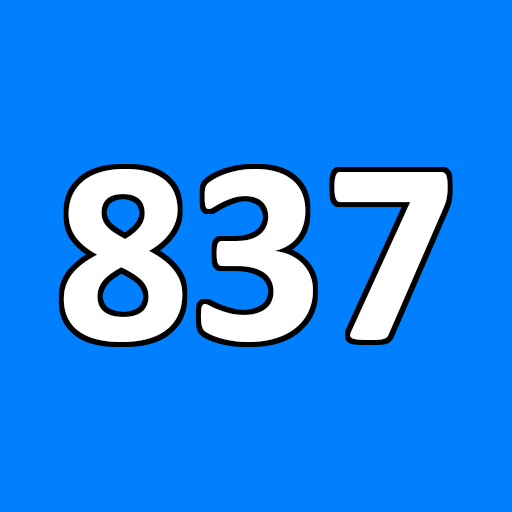
<style>
.page{position:relative;width:512px;height:512px;background:#0080ff}
.page>*{position:absolute;margin:0}
.t1{font:264.6px "Calibri-Bold";color:#ffffff}
</style>
<div class="page">
<p class="t1" style="left:63px;top:169px;width:385px;height:173px">837</p>
</div>
